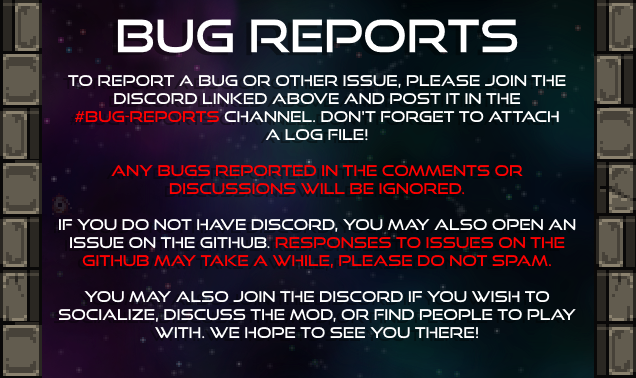
<style>
.page{position:relative;width:636px;height:378px}
.page>*{position:absolute;margin:0}
.t1{font:45px "GoodTimesRg-Regular";color:#ffffff}
.t2{font:15px "GoodTimesRg-Regular";color:#ffffff}
.t3{font:15px "GoodTimesRg-Regular";color:#ff0000}
</style>
<div class="page">
<p class="t1" style="left:117px;top:19px;width:401px;height:34px">bug reports</p>
<p class="t2" style="left:58px;top:74px;width:518px;height:265px;text-align:center">to report a bug or other issue, please join the<br>discord linked above and post it in the<br><span class="t3">#bug-reports </span>channel. Don't forget to attach<br>a log file!<br><br><span class="t3">Any bugs reported in the comments or<br>discussions will be ignored.<br><br></span>if you do not have discord, you may also open an<br>issue on the github. <span class="t3">Responses to issues on the<br>github may take a while, please do not spam.<br><br></span>You may also join the discord if you wish to<br>socialize, discuss the mod, or find people to play<br>with. We hope to see you there!</p>
</div>
